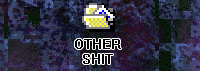
<style>
.page{position:relative;width:200px;height:71px}
.page>*{position:absolute;margin:0}
.t1{font:12.5px "System";color:#000000}
</style>
<div class="page">
<p class="t1" style="left:75px;top:39px;width:46px;height:25px;text-align:center">OTHER<br>SHIT</p>
</div>
